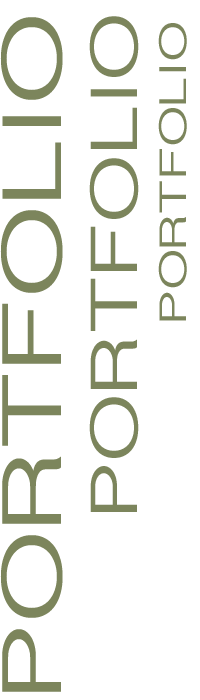
<style>
.page{position:relative;width:200px;height:700px;background:#ffffff}
.page>*{position:absolute;margin:0}
.t1{font:84.7px "MyanmarSangamMN";letter-spacing:-0.02em;color:#7c855c;text-transform:uppercase;scale:1.57 1}
.t2{font:67px "MyanmarSangamMN";letter-spacing:-0.02em;color:#7c855c;text-transform:uppercase;scale:1.46 1}
.t3{font:38.5px "MyanmarSangamMN";letter-spacing:-0.02em;color:#7c855c;text-transform:uppercase;scale:1.52 1}
</style>
<div class="page">
<p class="t1" style="left:0px;top:17px;width:63px;height:675px;rotate:-90deg">PortFolio</p>
<p class="t2" style="left:89px;top:16px;width:50px;height:496px;rotate:-90deg">PortFolio</p>
<p class="t3" style="left:158px;top:23px;width:29px;height:298px;rotate:-90deg">PortFolio</p>
</div>
